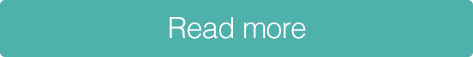
<style>
.page{position:relative;width:473px;height:57px;background:#4eb1ab}
.page>*{position:absolute;margin:0}
.t1{font:29.2px "Helvetica-Light";letter-spacing:-0.02em;color:#ffffff}
</style>
<div class="page">
<p class="t1" style="left:169px;top:17px;width:137px;height:22px">Read more</p>
</div>
